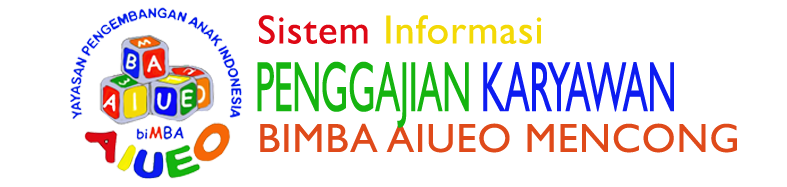
<style>
.page{position:relative;width:787px;height:187px;background:#ffffff}
.page>*{position:absolute;margin:0}
.t1{font:40.8px "GillSansMT";letter-spacing:0.025em;color:#f3d906}
.t2{font:40.8px "GillSansMT";letter-spacing:0.025em;color:#de0815}
.t3{font:71.5px "GillSansMT";letter-spacing:-0.015em;color:#15b410;scale:0.53 1}
.t4{font:71.5px "GillSansMT";letter-spacing:-0.015em;color:#0d1cf1;scale:0.53 1}
.t5{font:40.8px "GillSansMT";letter-spacing:0.025em;color:#df4a1a}
</style>
<div class="page">
<p class="t1" style="left:258px;top:15px;width:284px;height:29px"><span class="t2">Sistem </span>Informasi</p>
<p class="t3" style="left:257px;top:61px;width:417px;height:67px">PENGGAJIAN <span class="t4">KARYAWAN</span></p>
<p class="t5" style="left:260px;top:123px;width:477px;height:30px">BIMBA AIUEO MENCONG</p>
</div>
